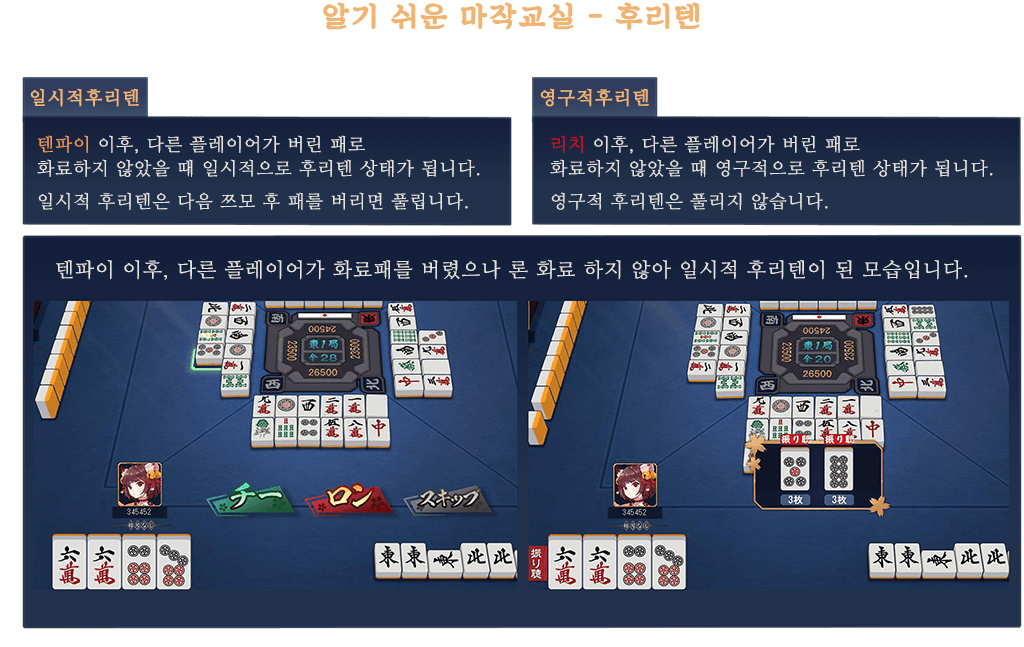
<style>
.page{position:relative;width:1024px;height:647px;background:#ffffff}
.page>*{position:absolute;margin:0}
.t1{font:29px "SDKukdetopokki-aLt";letter-spacing:0.06em;color:#f1b472;font-weight:bold}
.t2{font:18px "NanumMyeongjo";letter-spacing:0.06em;color:#f1b472;font-weight:bold}
.t3{font:18px/33px "NanumMyeongjo";letter-spacing:0.06em;color:#e7e5e1}
.t4{font:18px/24px "NanumMyeongjo";letter-spacing:0.06em;color:#f69a4a}
.t5{font:18px/24px "NanumMyeongjo";letter-spacing:0.06em;color:#e7e5e1}
.t6{font:18px/24px "NanumMyeongjo";letter-spacing:0.06em;color:#e0070d}
.t7{font:20px "NanumMyeongjo";letter-spacing:0.06em;color:#e7e5e1}
</style>
<div class="page">
<p class="t1" style="left:323px;top:2px;width:377px;height:28px">알기 쉬운 마작교실 - 후리텐</p>
<p class="t2" style="left:30px;top:88px;width:109px;height:19px">일시적후리텐</p>
<p class="t2" style="left:540px;top:88px;width:109px;height:19px">영구적후리텐</p>
<p class="t3" style="left:37px;top:135px;width:443px;height:75px"><span class="t4">텐파이</span><span class="t5"> 이후, 다른 플레이어가 버린 패로<br></span>화료하지 않았을 때 일시적으로 후리텐 상태가 됩니다.<br>일시적 후리텐은 다음 쯔모 후 패를 버리면 풀립니다.</p>
<p class="t3" style="left:550px;top:135px;width:443px;height:75px"><span class="t6">리치</span><span class="t5"> 이후, 다른 플레이어가 버린 패로<br>화료하지 않았을 </span>때 영구적으로 후리텐 상태가 됩니다.<br>영구적 후리텐은 풀리지 않습니다.</p>
<p class="t7" style="left:56px;top:260px;width:912px;height:20px">텐파이 이후, 다른 플레이어가 화료패를 버렸으나 론 화료 하지 않아 일시적 후리텐이 된 모습입니다.</p>
</div>
